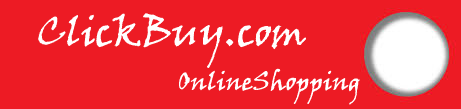
<style>
.page{position:relative;width:461px;height:109px;background:#ed1b24}
.page>*{position:absolute;margin:0}
.t1{font:40px "VinerHandITC";color:#ffffff}
.t2{font:25px "VinerHandITC";color:#ffffff}
</style>
<div class="page">
<p class="t1" style="left:38px;top:13px;width:268px;height:55px">ClickBuy.com</p>
<p class="t2" style="left:179px;top:68px;width:181px;height:37px"><span class="t1">     </span>OnlineShopping</p>
</div>
